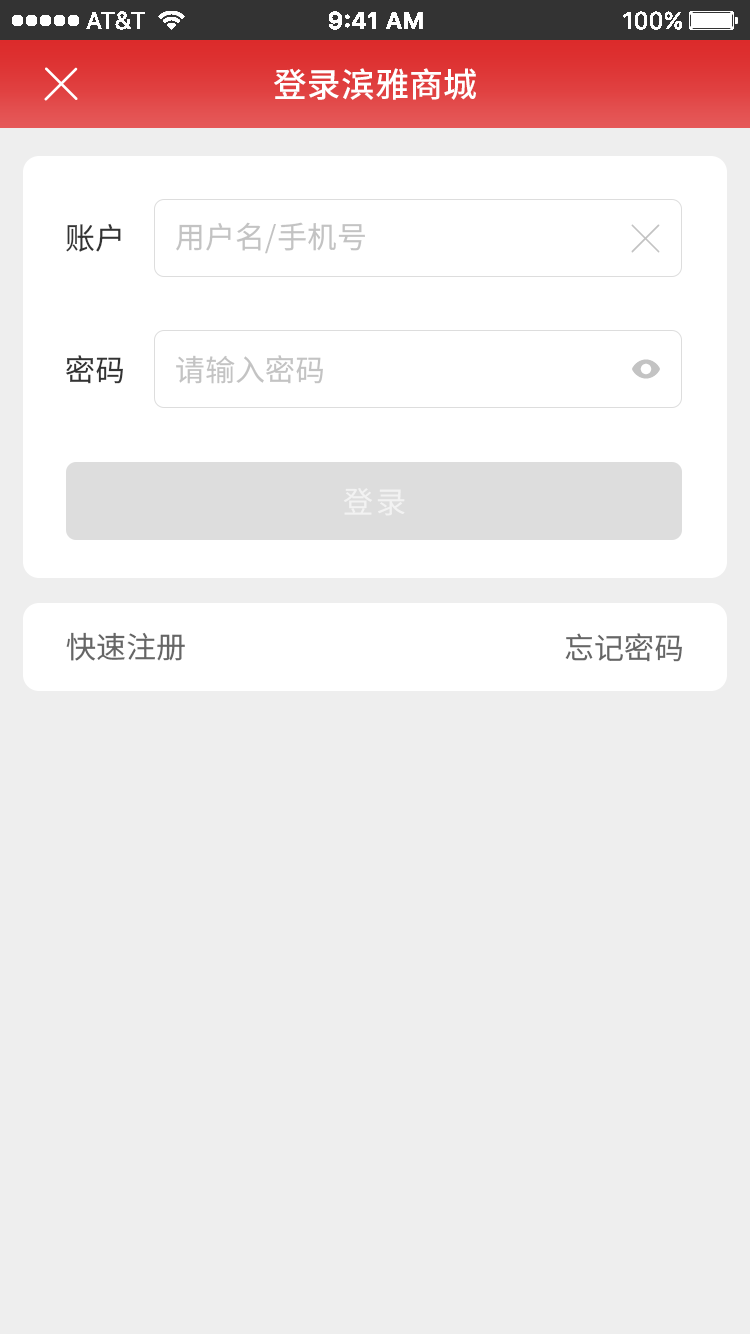
<style>
.page{position:relative;width:750px;height:1334px;background:#eeeeee}
.page>*{position:absolute;margin:0}
.t1{font:34px "SourceHanSansCN-Medium";color:#ffffff}
.t2{font:30px "SourceHanSansCN-Regular";color:#c3c3c3}
.t3{font:30px "SourceHanSansCN-Regular";color:#333333}
.t4{font:30px "SourceHanSansCN-Regular";letter-spacing:0.1em;color:#f2f2f2}
.t5{font:30px "SourceHanSansCN-Regular";color:#666666}
</style>
<div class="page">
<p class="t1" style="left:274px;top:68px;width:202px;height:32px">登录滨雅商城</p>
<p class="t2" style="left:176px;top:222px;width:189px;height:32px">用户名/手机号</p>
<p class="t3" style="left:66px;top:223px;width:55px;height:29px">账户</p>
<p class="t3" style="left:66px;top:355px;width:57px;height:29px">密码</p>
<p class="t2" style="left:176px;top:355px;width:147px;height:29px">请输入密码</p>
<p class="t4" style="left:343px;top:488px;width:62px;height:28px">登录</p>
<p class="t5" style="left:66px;top:632px;width:119px;height:29px">快速注册</p>
<p class="t5" style="left:565px;top:633px;width:117px;height:29px">忘记密码</p>
</div>
